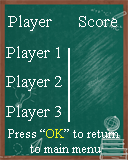
<style>
.page{position:relative;width:128px;height:160px}
.page>*{position:absolute;margin:0}
.t1{font:16.7px "TimesNewRomanPSMT";color:#ffffff}
.t2{font:12.5px "TimesNewRomanPSMT";color:#ffffff}
.t3{font:12.5px "TimesNewRomanPSMT";color:#eff21c}
</style>
<div class="page">
<p class="t1" style="left:8px;top:15px;width:44px;height:16px">Player</p>
<p class="t1" style="left:79px;top:16px;width:38px;height:11px">Score</p>
<p class="t1" style="left:6px;top:46px;width:54px;height:16px">Player 1</p>
<p class="t1" style="left:6px;top:75px;width:56px;height:16px">Player 2</p>
<p class="t1" style="left:6px;top:105px;width:55px;height:16px">Player 3</p>
<p class="t2" style="left:8px;top:129px;width:111px;height:24px;text-align:center">Press “<span class="t3">OK</span>” to return <br>to main menu</p>
</div>
